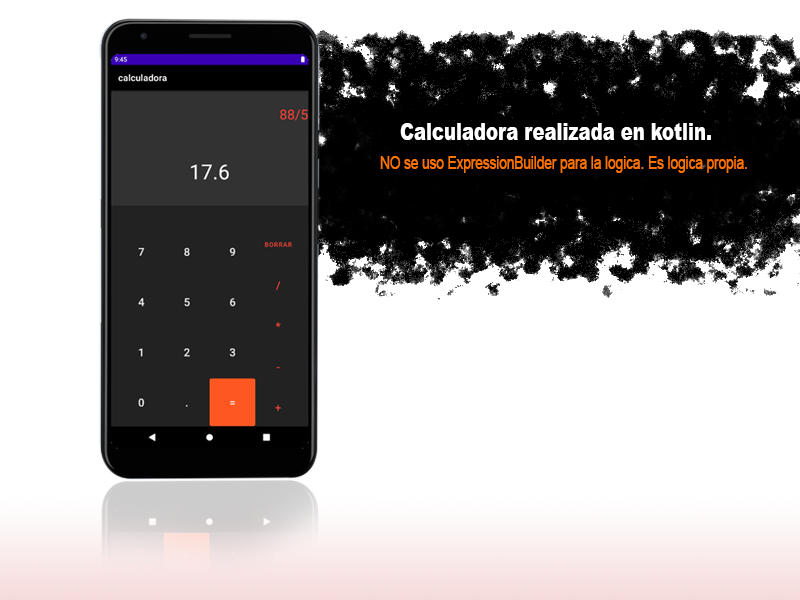
<style>
.page{position:relative;width:800px;height:600px;background:#ffffff}
.page>*{position:absolute;margin:0}
.t1{font:24px "Arial-Black";color:#ffffff;scale:0.75 1}
.t2{font:18px "ArialMT";color:#ff7200;scale:0.75 1}
</style>
<div class="page">
<p class="t1" style="left:400px;top:123px;width:311px;height:17px">Calculadora realizada en kotlin.</p>
<p class="t2" style="left:380px;top:156px;width:367px;height:17px">NO se uso ExpressionBuilder para la logica. Es logica propia.</p>
</div>
